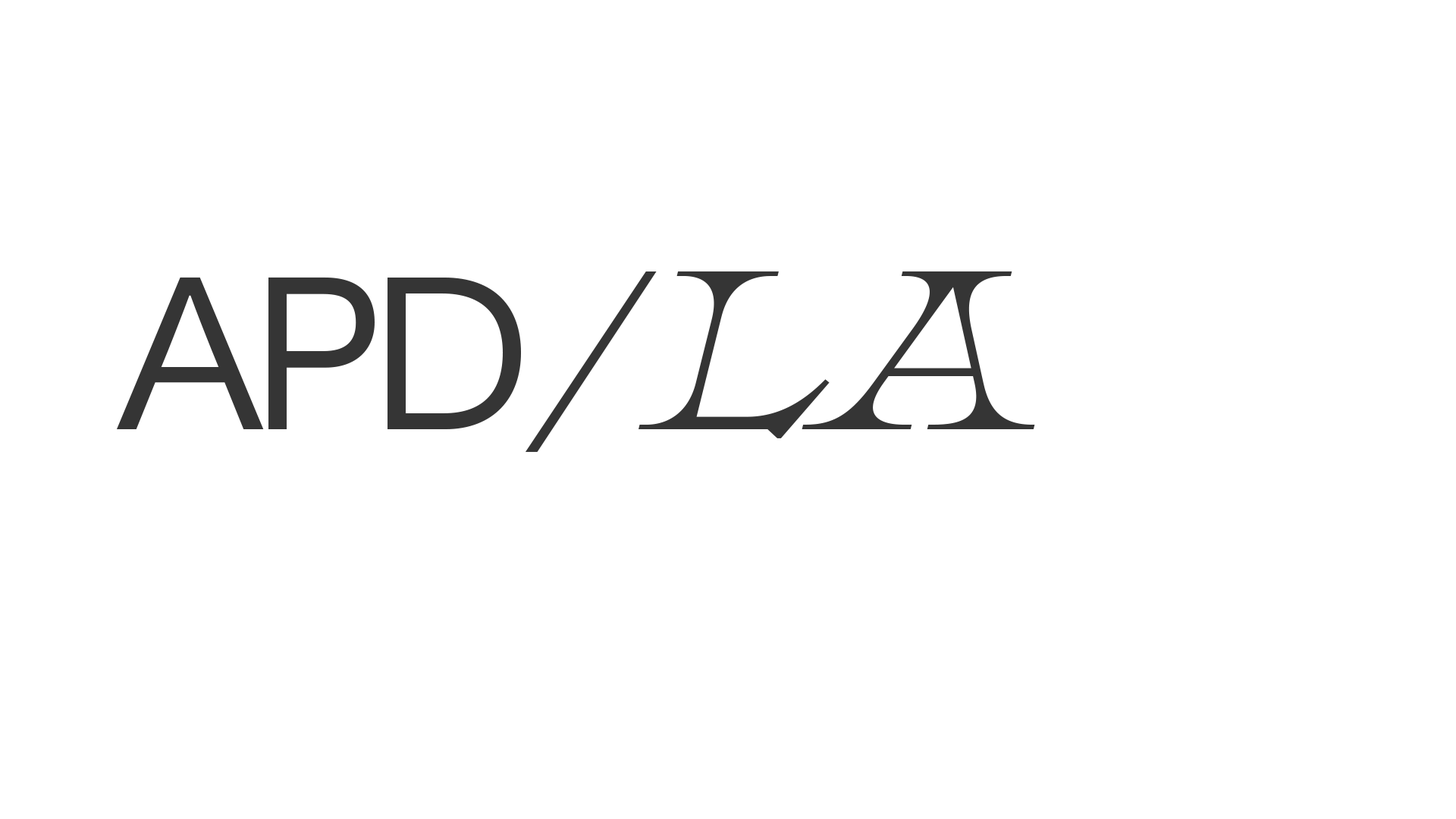
<style>
.page{position:relative;width:1456px;height:819px;background:#ffffff}
.page>*{position:absolute;margin:0}
.t1{font:252.6px "DegularDisplay-Regular";letter-spacing:-0.01em;color:#353535}
.t2{font:225.5px "Clifton-Italic";letter-spacing:-0.022em;color:#353535}
</style>
<div class="page">
<p class="t1" style="left:117px;top:271px;width:918px;height:181px">APD<span class="t2">/LA</span></p>
</div>
